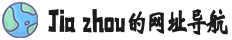
<style>
.page{position:relative;width:232px;height:40px;background:#ffffff}
.page>*{position:absolute;margin:0}
.t1{font:32.6px "zihun255hao-bowenyishuhei";color:#1c1b1b;scale:0.68 1}
.t2{font:29.9px "STXinwei";letter-spacing:-0.14em;color:#1c1b1b;font-weight:bold;scale:0.76 1}
</style>
<div class="page">
<p class="t1" style="left:48px;top:9px;width:180px;height:26px">Jia zhou<span class="t2">的网址导航</span></p>
</div>
